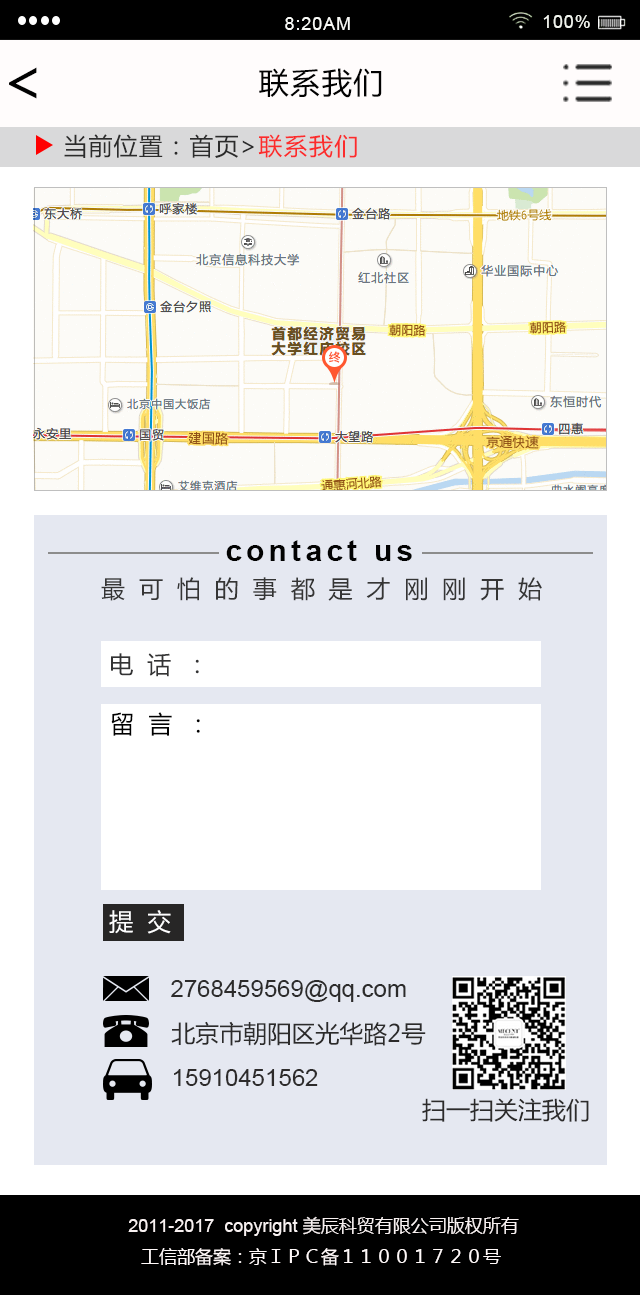
<style>
.page{position:relative;width:640px;height:1295px;background:#e5e8f1}
.page>*{position:absolute;margin:0}
.t1{font:18px "ArialMT";letter-spacing:0.05em;color:#f9faf7}
.t2{font:18px "ArialMT";letter-spacing:0.05em;color:#f1f4ee}
.t3{font:60px "MicrosoftYaHei";letter-spacing:0.05em;color:#020202}
.t4{font:30px "MicrosoftYaHei";letter-spacing:0.05em;color:#020202}
.t5{font:24px "MicrosoftYaHei";letter-spacing:0.05em}
.t6{font:30px "Arial-BoldMT";letter-spacing:0.14em;color:#020202}
.t7{font:24px "MicrosoftYaHei";letter-spacing:0.58em;color:#353535}
.t8{font:24px "MicrosoftYaHei";letter-spacing:0.58em;color:#333334}
.t9{font:24px "MicrosoftYaHei";letter-spacing:0.58em;color:#000000}
.t10{font:24px "MicrosoftYaHei";letter-spacing:0.58em;color:#fefeff}
.t11{font:24px "ArialMT";color:#2c2b2b}
.t12{font:24px "MicrosoftYaHei";color:#2c2b2b}
.t13{font:24px "ArialMT";color:#2d2b2b}
.t14{font:18px/3px "ArialMT";color:#f8f1f1}
.t15{font:18px/3px "MicrosoftYaHei";color:#f8f1f1}
.t16{font:18px/31px "MicrosoftYaHei";color:#fff9f9}
</style>
<div class="page">
<p class="t1" style="left:285px;top:17px;width:65px;height:13px">8:20AM</p>
<p class="t2" style="left:543px;top:15px;width:47px;height:13px">100%</p>
<p class="t3" style="left:9px;top:67px;width:28px;height:32px">&lt;</p>
<p class="t4" style="left:259px;top:68px;width:123px;height:30px">联系我们</p>
<p class="t5" style="left:64px;top:134px;width:293px;height:24px">当前位置：首页&gt;联系我们</p>
<p class="t6" style="left:226px;top:540px;width:186px;height:21px">contact us</p>
<p class="t7" style="left:101px;top:577px;width:441px;height:24px">最可怕的事都是才刚刚开始</p>
<p class="t8" style="left:111px;top:653px;width:88px;height:24px">电话：</p>
<p class="t9" style="left:111px;top:712px;width:89px;height:24px">留言：</p>
<p class="t10" style="left:109px;top:910px;width:62px;height:24px">提交</p>
<p class="t11" style="left:171px;top:980px;width:235px;height:22px">2768459569@qq.com</p>
<p class="t12" style="left:171px;top:1021px;width:255px;height:25px">北京市朝阳区光华路2号</p>
<p class="t13" style="left:174px;top:1069px;width:144px;height:17px">15910451562</p>
<p class="t12" style="left:422px;top:1098px;width:167px;height:24px">扫一扫关注我们</p>
<p class="t14" style="left:128px;top:1216px;width:391px;height:50px;text-align:justify">2011-2017  copyright<span class="t15"> 美辰科贸有限公司版权所有<br></span><span class="t16">工信部备案：京ＩＰＣ备１１００１７２０号</span></p>
</div>
